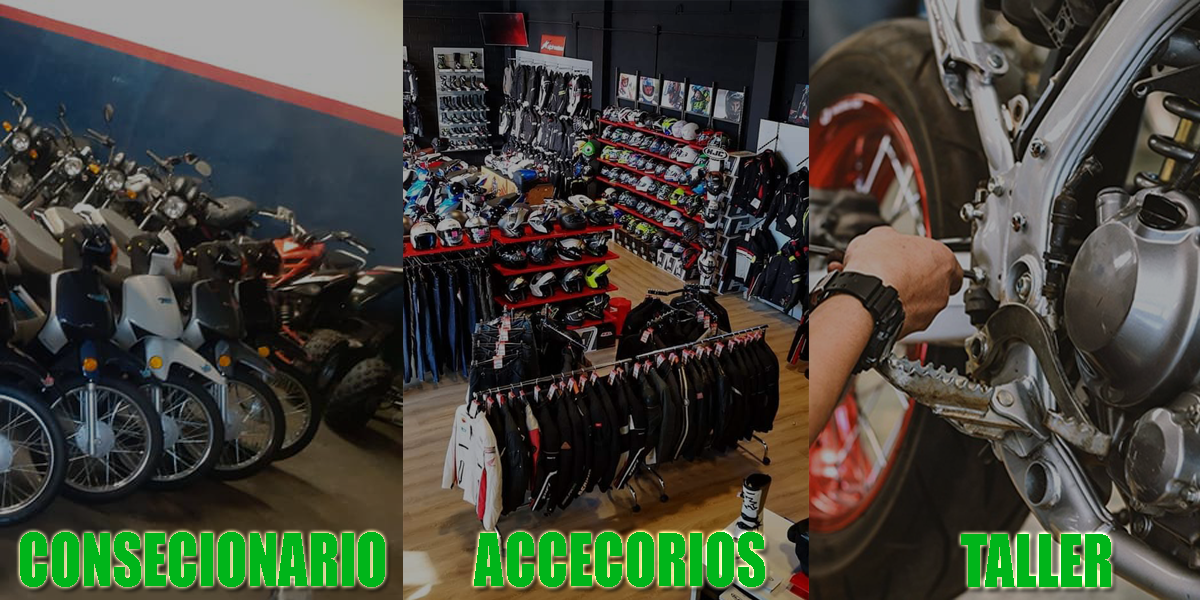
<style>
.page{position:relative;width:1200px;height:600px}
.page>*{position:absolute;margin:0}
.t1{font:66.7px "Impact";color:#00b51a;scale:0.87 1}
</style>
<div class="page">
<p class="t1" style="left:20px;top:532px;width:365px;height:55px">CONSECIONARIO</p>
<p class="t1" style="left:474px;top:532px;width:291px;height:55px">ACCECORIOS</p>
<p class="t1" style="left:961px;top:534px;width:150px;height:53px">TALLER</p>
</div>
